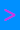
<style>
.page{position:relative;width:20px;height:30px;background:#0090ff}
.page>*{position:absolute;margin:0}
.t1{font:25px "Calibri";color:#d72de2}
</style>
<div class="page">
<p class="t1" style="left:4px;top:9px;width:12px;height:12px">&gt;</p>
</div>
